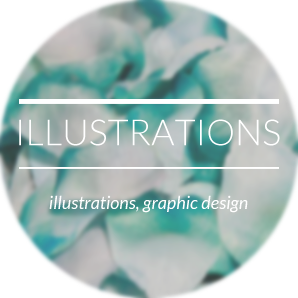
<style>
.page{position:relative;width:298px;height:298px}
.page>*{position:absolute;margin:0}
.t1{font:36px "Lato-Light";color:#ffffff}
.t2{font:18px "Lato-Italic";color:#ffffff}
</style>
<div class="page">
<p class="t1" style="left:19px;top:119px;width:261px;height:27px">ILLUSTRATIONS</p>
<p class="t2" style="left:49px;top:195px;width:199px;height:18px">illustrations, graphic design</p>
</div>
